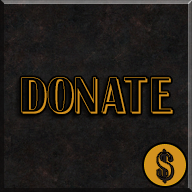
<style>
.page{position:relative;width:192px;height:192px}
.page>*{position:absolute;margin:0}
.t1{font:48px "AAlbionicTitulNrSh";color:#d3921f}
.t2{font:36px "AAlbionicTitulNrSh";color:#2a2323}
</style>
<div class="page">
<p class="t1" style="left:21px;top:77px;width:152px;height:37px">Donate</p>
<p class="t2" style="left:157px;top:149px;width:17px;height:34px">$</p>
</div>
